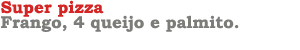
<style>
.page{position:relative;width:300px;height:50px;background:#ffffff}
.page>*{position:absolute;margin:0}
.t1{font:17px "BookmanOldStyle-Bold";color:#d42525}
.t2{font:17px "BookmanOldStyle-Bold";color:#7c7c79}
</style>
<div class="page">
<p class="t1" style="left:1px;top:0px;width:103px;height:17px">Super pizza</p>
<p class="t2" style="left:1px;top:15px;width:238px;height:17px">Frango, 4 queijo e palmito.</p>
</div>
